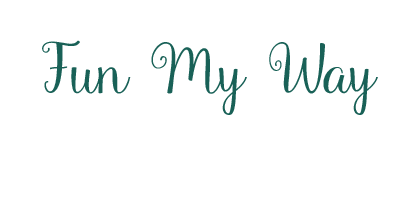
<style>
.page{position:relative;width:400px;height:200px;background:#ffffff}
.page>*{position:absolute;margin:0}
.t1{font:66.7px "Gardenia";color:#196157}
</style>
<div class="page">
<p class="t1" style="left:42px;top:40px;width:336px;height:75px">Fun My Way</p>
</div>
